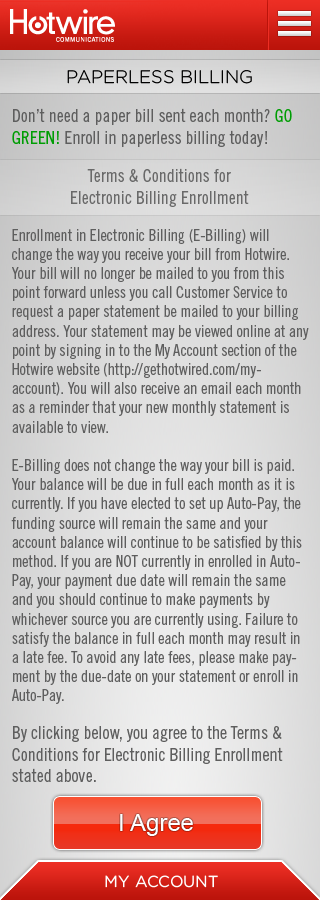
<style>
.page{position:relative;width:320px;height:900px}
.page>*{position:absolute;margin:0}
.t1{font:18px "Gotham-Light";color:#000000;text-transform:uppercase}
.t2{font:18px "TradeGothicLTStd-Cn18";color:#5e5e5e}
.t3{font:18px "TradeGothicLTStd-Cn18";color:#009d04}
.t4{font:18px "TradeGothicLTStd-Cn18";color:#696969}
.t5{font:16px "TradeGothicLTStd-Cn18";color:#5e5e5e}
.t6{font:24px "ArialMT";color:#ffffff}
.t7{font:16px "Gotham-Book";color:#ffffff;text-transform:uppercase}
</style>
<div class="page">
<p class="t1" style="left:67px;top:70px;width:185px;height:14px">Paperless Billing</p>
<p class="t2" style="left:12px;top:108px;width:280px;height:39px">Don’t need a paper bill sent each month? <span class="t3">GO GREEN!</span> Enroll in paperless billing today!</p>
<p class="t4" style="left:71px;top:168px;width:178px;height:39px;text-align:center">Terms &amp; Conditions for <br>Electronic Billing Enrollment</p>
<p class="t5" style="left:11px;top:229px;width:298px;height:475px">Enrollment in Electronic Billing (E-Billing) will change the way you receive your bill from Hotwire. Your bill will no longer be mailed to you from this point forward unless you call Customer Service to request a paper statement be mailed to your billing address. Your statement may be viewed online at any point by signing in to the My Account section of the Hotwire website (http://gethotwired.com/my-account). You will also receive an email each month as a reminder that your new monthly statement is available to view.<br><br>E-Billing does not change the way your bill is paid. Your balance will be due in full each month as it is currently. If you have elected to set up Auto-Pay, the funding source will remain the same and your account balance will continue to be satisfied by this method. If you are NOT currently in enrolled in Auto-Pay, your payment due date will remain the same and you should continue to make payments by whichever source you are currently using. Failure to satisfy the balance in full each month may result in a late fee. To avoid any late fees, please make payment by the due-date on your statement or enroll in Auto-Pay.</p>
<p class="t2" style="left:12px;top:725px;width:271px;height:57px">By clicking below, you agree to the Terms &amp; Conditions for Electronic Billing Enrollment stated above.</p>
<p class="t6" style="left:120px;top:814px;width:73px;height:22px">I Agree</p>
<p class="t7" style="left:105px;top:875px;width:113px;height:13px">My Account</p>
</div>
